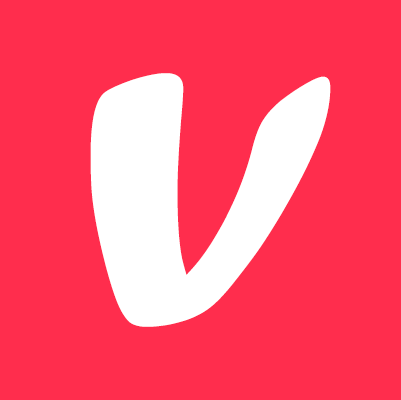
<style>
.page{position:relative;width:401px;height:400px;background:#ff2d4d}
.page>*{position:absolute;margin:0}
.t1{font:380px "ForteMT";letter-spacing:0.029em;color:#ffffff;scale:1.24 1}
</style>
<div class="page">
<p class="t1" style="left:90px;top:73px;width:241px;height:254px">V</p>
</div>
